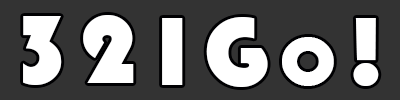
<style>
.page{position:relative;width:400px;height:100px;background:#333333}
.page>*{position:absolute;margin:0}
.t1{font:100px "Bauhaus93";letter-spacing:0.1em;color:#ffffff;font-variant:small-caps;scale:1.06 1}
</style>
<div class="page">
<p class="t1" style="left:23px;top:16px;width:39px;height:69px">3</p>
<p class="t1" style="left:83px;top:15px;width:51px;height:68px">2</p>
<p class="t1" style="left:206px;top:17px;width:173px;height:70px">Go!</p>
<p class="t1" style="left:162px;top:18px;width:21px;height:67px">1</p>
</div>
